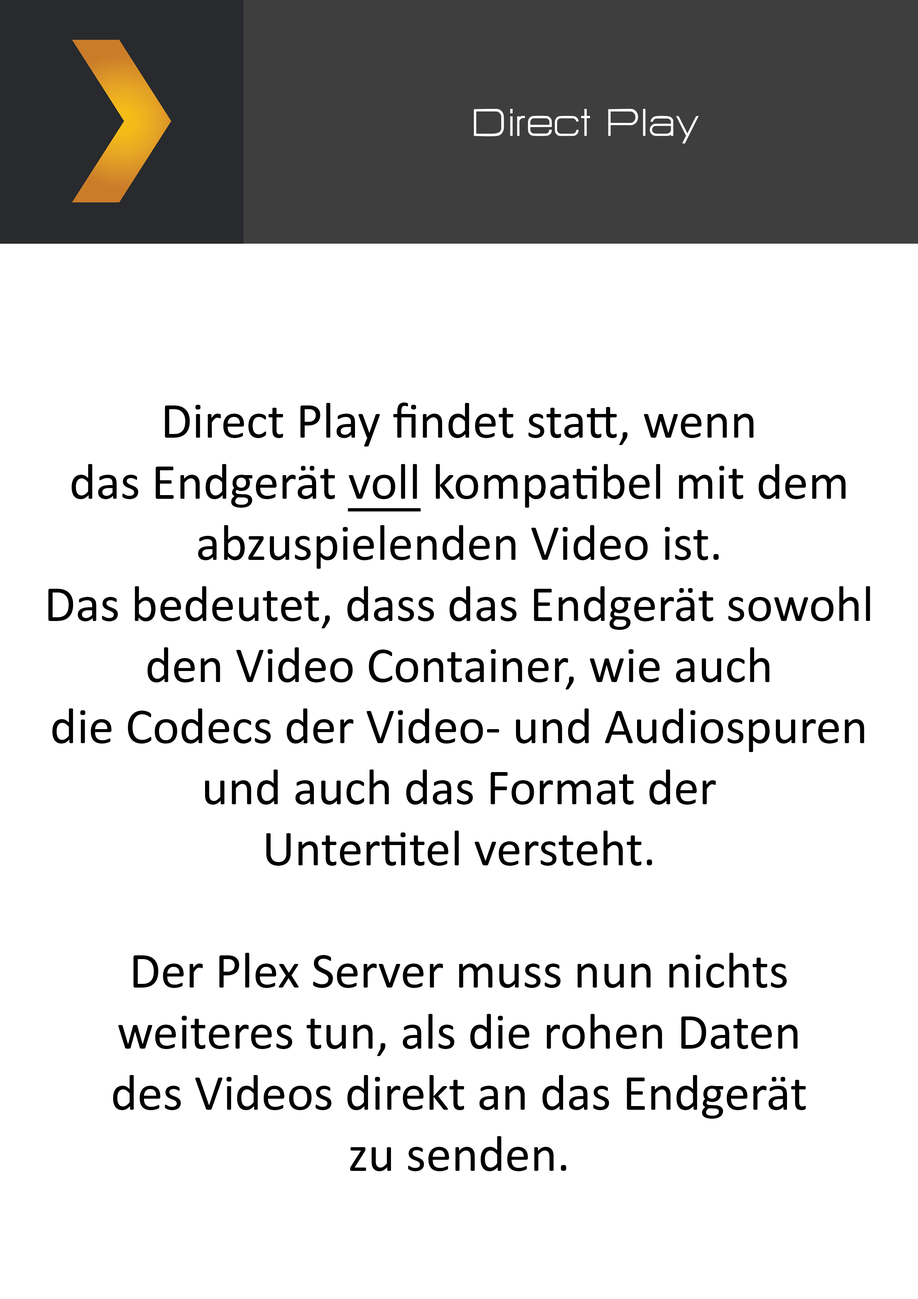
<style>
.page{position:relative;width:918px;height:1299px;background:#ffffff}
.page>*{position:absolute;margin:0}
.t1{font:47.8px "HURTMOLDPersonalUse-Regular";color:#ffffff}
.t2{font:50.9px "Calibri";color:#000000}
.t3{font:50.9px "Calibri";color:#000000;text-decoration:underline}
</style>
<div class="page">
<p class="t1" style="left:474px;top:109px;width:225px;height:35px">Direct Play</p>
<p class="t2" style="left:48px;top:402px;width:822px;height:769px;text-align:center">Direct Play findet statt, wenn<br>das Endgerät <span class="t3">voll</span> kompatibel mit dem<br>abzuspielenden Video ist.<br>Das bedeutet, dass das Endgerät sowohl<br>den Video Container, wie auch<br>die Codecs der Video- und Audiospuren<br>und auch das Format der<br>Untertitel versteht.<br><br>Der Plex Server muss nun nichts<br>weiteres tun, als die rohen Daten<br>des Videos direkt an das Endgerät<br>zu senden.</p>
</div>
